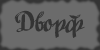
<style>
.page{position:relative;width:100px;height:50px;background:#6b6b6b}
.page>*{position:absolute;margin:0}
.t1{font:25px "MinusmanC";color:#343434}
</style>
<div class="page">
<p class="t1" style="left:14px;top:10px;width:71px;height:28px">Дворф</p>
</div>
